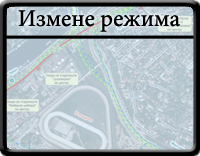
<style>
.page{position:relative;width:200px;height:156px}
.page>*{position:absolute;margin:0}
.t1{font:24px "MinionPro-Medium";color:#000000}
</style>
<div class="page">
<p class="t1" style="left:18px;top:10px;width:163px;height:22px">Измене режима</p>
</div>
